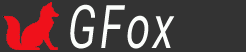
<style>
.page{position:relative;width:246px;height:52px;background:#333333}
.page>*{position:absolute;margin:0}
.t1{font:60px "Roboto-Regular";letter-spacing:0.08em;color:#fbfdfb;font-style:italic;scale:0.7 1}
</style>
<div class="page">
<p class="t1" style="left:70px;top:4px;width:105px;height:45px">GFox</p>
</div>
